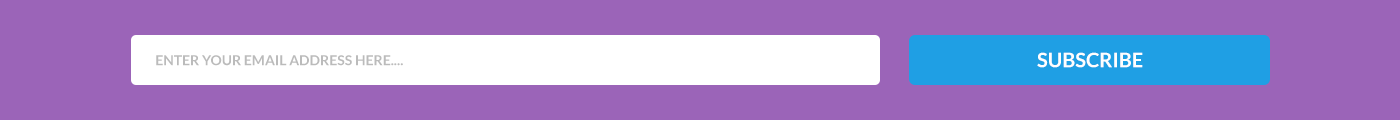
<style>
.page{position:relative;width:1400px;height:120px;background:#9b64b8}
.page>*{position:absolute;margin:0}
.t1{font:20px "Lato-Bold";color:#fffefe;text-transform:uppercase}
.t2{font:14px "Lato-Bold";color:#bbbbbb}
</style>
<div class="page">
<p class="t1" style="left:1037px;top:52px;width:106px;height:16px">SUBSCRIBE</p>
<p class="t2" style="left:156px;top:55px;width:247px;height:11px">ENTER YOUR EMAIL ADDRESS HERE....</p>
</div>
